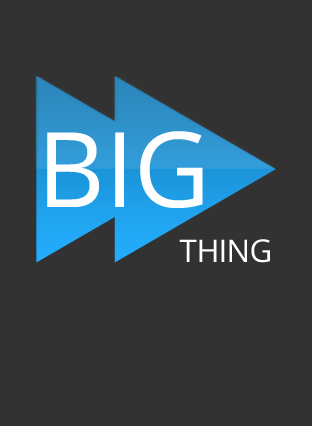
<style>
.page{position:relative;width:312px;height:426px;background:#323232}
.page>*{position:absolute;margin:0}
.t1{font:104.5px "OpenSans";color:#ffffff}
.t2{font:31.4px "OpenSans";letter-spacing:-0.025em;color:#ffffff}
</style>
<div class="page">
<p class="t1" style="left:47px;top:131px;width:156px;height:77px">BIG</p>
<p class="t2" style="left:179px;top:239px;width:91px;height:24px">THING</p>
</div>
